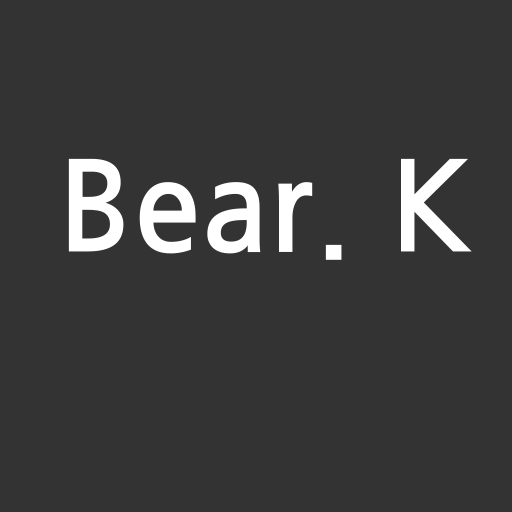
<style>
.page{position:relative;width:512px;height:512px;background:#333333}
.page>*{position:absolute;margin:0}
.t1{font:125px "JejuGothic";color:#ffffff}
</style>
<div class="page">
<p class="t1" style="left:68px;top:158px;width:404px;height:102px">Bear. K</p>
</div>
